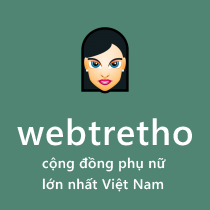
<style>
.page{position:relative;width:210px;height:210px;background:#4f8572}
.page>*{position:absolute;margin:0}
.t1{font:36px "SegoeWP-Semibold";letter-spacing:0.025em;color:#ffffff}
.t2{font:14px "SegoeWP-Semibold";letter-spacing:0.025em;color:#fefefe}
.t3{font:14px "SegoeWP-Semibold";letter-spacing:0.025em;color:#ffffff}
</style>
<div class="page">
<p class="t1" style="left:17px;top:118px;width:175px;height:28px">webtretho</p>
<p class="t2" style="left:42px;top:157px;width:124px;height:15px">cộng đồng phụ nữ</p>
<p class="t3" style="left:42px;top:178px;width:122px;height:14px">lớn nhất Việt Nam</p>
</div>
